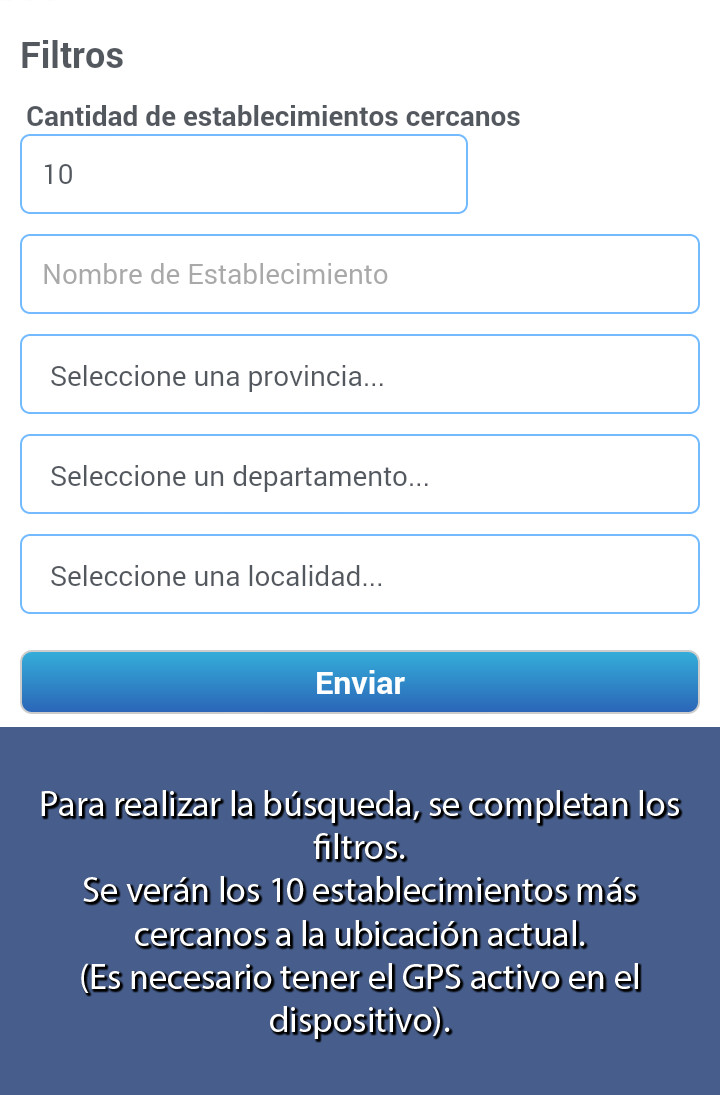
<style>
.page{position:relative;width:720px;height:1095px;background:#ffffff}
.page>*{position:absolute;margin:0}
.t1{font:36px "MyriadPro-Regular";color:#ffffff}
</style>
<div class="page">
<p class="t1" style="left:41px;top:790px;width:638px;height:249px;text-align:center">Para realizar la búsqueda, se completan los<br>filtros.<br>Se verán los 10 establecimientos más<br>cercanos a la ubicación actual.<br>(Es necesario tener el GPS activo en el<br>dispositivo).</p>
</div>
